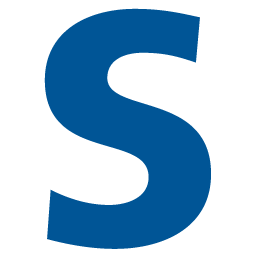
<style>
.page{position:relative;width:256px;height:256px;background:#ffffff}
.page>*{position:absolute;margin:0}
.t1{font:445.2px "FrutigerLTStd-Bold";color:#005596}
</style>
<div class="page">
<p class="t1" style="left:44px;top:8px;width:167px;height:241px">s</p>
</div>
